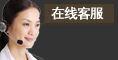
<style>
.page{position:relative;width:118px;height:60px;background:#333333}
.page>*{position:absolute;margin:0}
.t1{font:14px "SimHei";letter-spacing:-0.1em;color:#ffffff;font-weight:bold}
</style>
<div class="page">
<p class="t1" style="left:51px;top:6px;width:53px;height:14px">在线客服</p>
</div>
